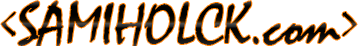
<style>
.page{position:relative;width:358px;height:46px;background:#ffffff}
.page>*{position:absolute;margin:0}
.t1{font:60px "Mistral";color:#000000}
.t2{font:60px "TempusSansITC";color:#000000}
</style>
<div class="page">
<p class="t1" style="left:1px;top:1px;width:356px;height:47px"><span class="t2">&lt;</span>SAMIHOLCK.com<span class="t2">&gt;</span></p>
</div>
